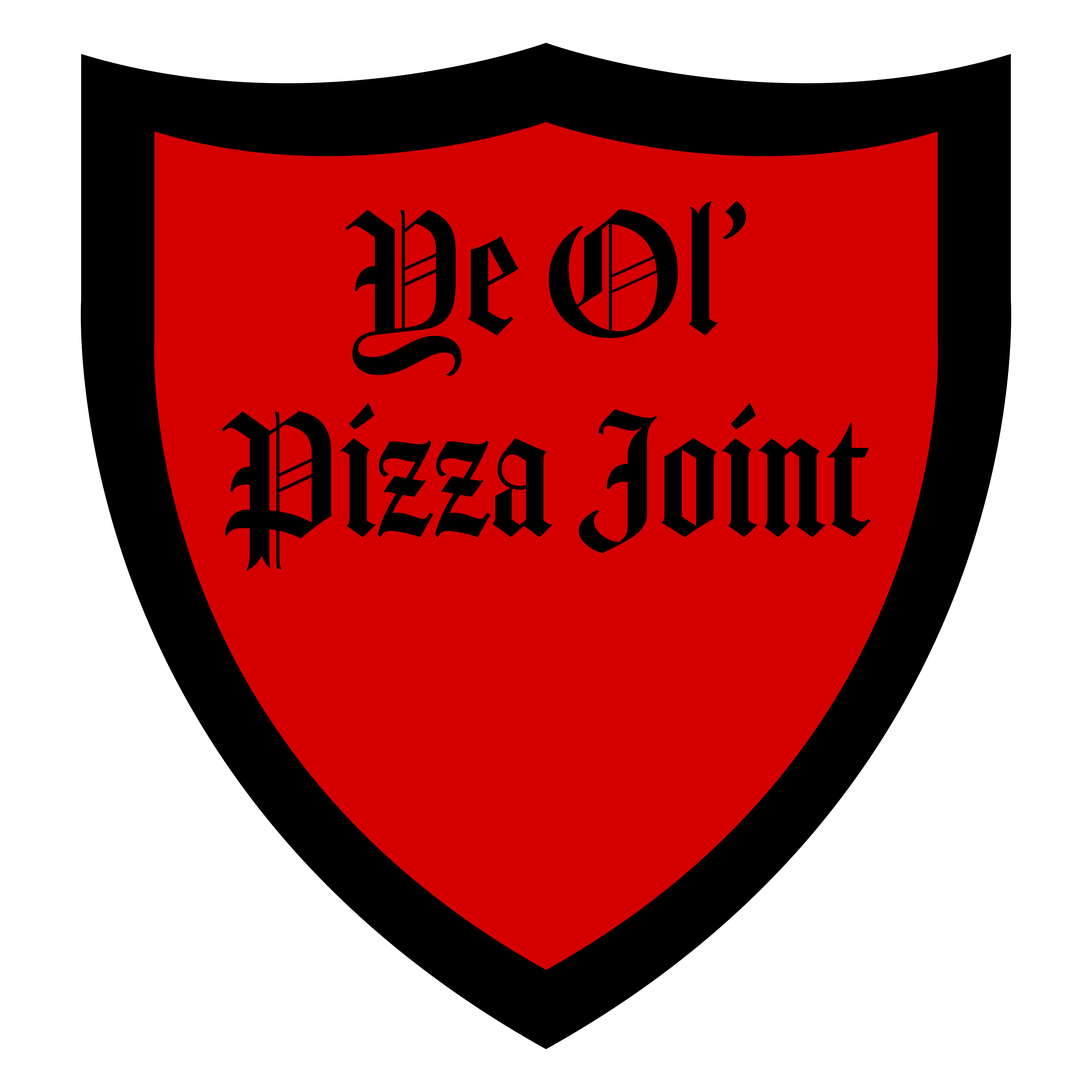
<style>
.page{position:relative;width:1092px;height:1092px;background:#ffffff}
.page>*{position:absolute;margin:0}
.t1{font:168.2px "Amador";color:#000000}
</style>
<div class="page">
<p class="t1" style="left:222px;top:201px;width:649px;height:370px;text-align:center">Ye Ol’<br>Pizza Joint</p>
</div>
